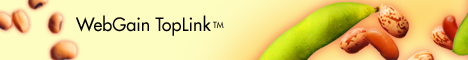
<style>
.page{position:relative;width:468px;height:60px;background:#fdfdc1}
.page>*{position:absolute;margin:0}
.t1{font:18px "Futura";color:#000000}
.t2{font:8px "Futura"}
</style>
<div class="page">
<p class="t1" style="left:56px;top:10px;width:175px;height:29px">WebGain TopLink</p>
<p class="t2" style="left:193px;top:17px;width:50px;height:16px">TM</p>
</div>
